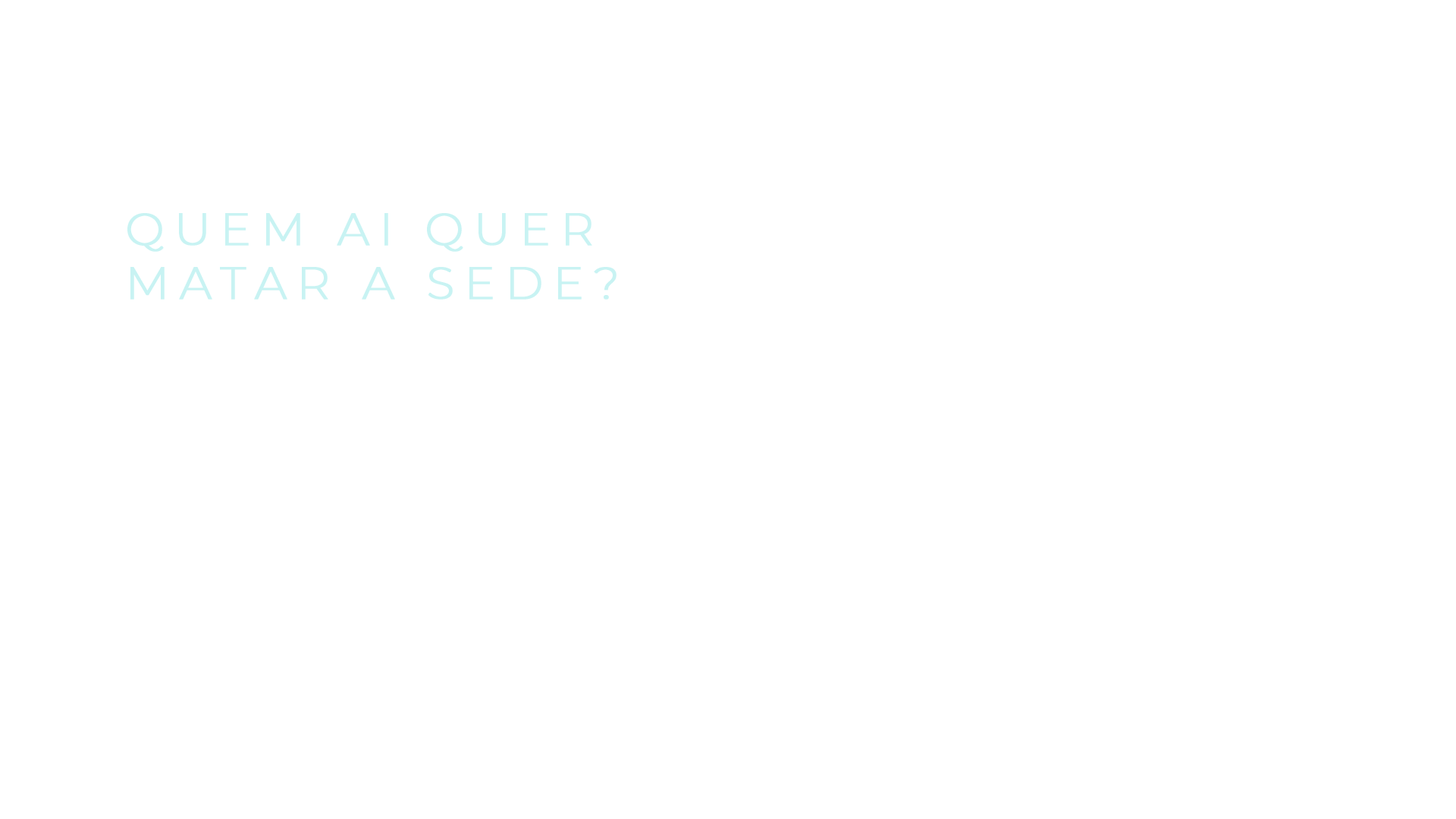
<style>
.page{position:relative;width:1456px;height:819px;background:#ffffff}
.page>*{position:absolute;margin:0}
.t1{font:45.5px/53.8px "Montserrat-Light";letter-spacing:0.2em;color:#c8f3f3;font-weight:bold}
</style>
<div class="page">
<p class="t1" style="left:127px;top:213px;width:490px;height:87px">QUEM AI QUER<br>MATAR A SEDE?</p>
</div>
